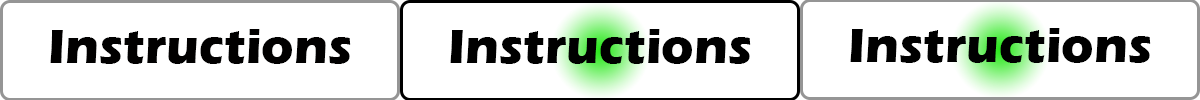
<style>
.page{position:relative;width:1200px;height:100px;background:#ffffff}
.page>*{position:absolute;margin:0}
.t1{font:50px "ErasITC-Bold";color:#010000}
.t2{font:50px "ErasITC-Bold";color:#000000}
</style>
<div class="page">
<p class="t1" style="left:50px;top:29px;width:301px;height:35px">Instructions</p>
<p class="t2" style="left:450px;top:29px;width:301px;height:35px">Instructions</p>
<p class="t2" style="left:850px;top:28px;width:301px;height:35px">Instructions</p>
</div>
